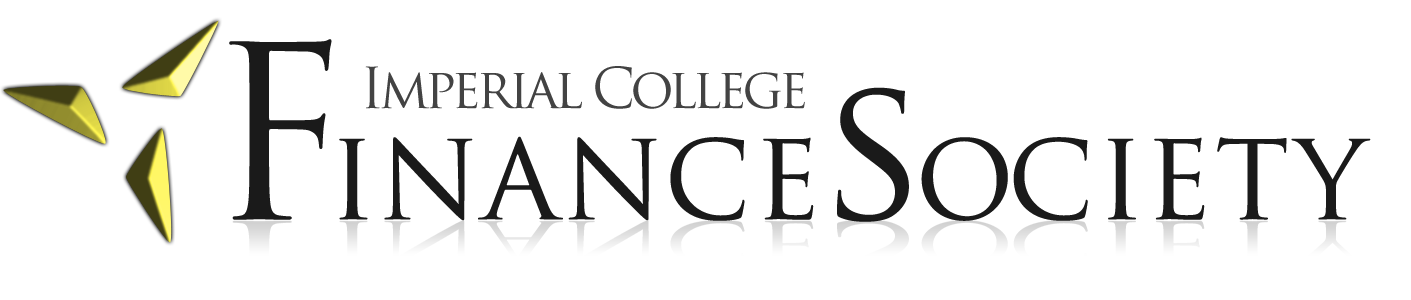
<style>
.page{position:relative;width:1411px;height:300px;background:#ffffff}
.page>*{position:absolute;margin:0}
.t1{font:125.5px "TrajanPro-Regular";letter-spacing:0.018em;color:#1a1a1a}
.t2{font:236.4px "TrajanPro-Regular";letter-spacing:-0.162em;color:#1a1a1a}
.t3{font:125.5px "TrajanPro-Regular";letter-spacing:-0.162em;color:#1a1a1a}
.t4{font:201.1px "TrajanPro-Regular";letter-spacing:-0.062em;color:#1a1a1a}
.t5{font:125.5px "TrajanPro-Regular";letter-spacing:-0.062em;color:#1a1a1a}
.t6{font:54.9px "TrajanPro-Regular";letter-spacing:-0.082em;color:#434343}
</style>
<div class="page">
<p class="t1" style="left:229px;top:39px;width:1142px;height:183px"><span class="t2">F</span><span class="t3"> i </span>nance<span class="t4">s</span><span class="t5">o</span>ciety</p>
<p class="t6" style="left:365px;top:66px;width:440px;height:43px">Imperial College</p>
</div>
